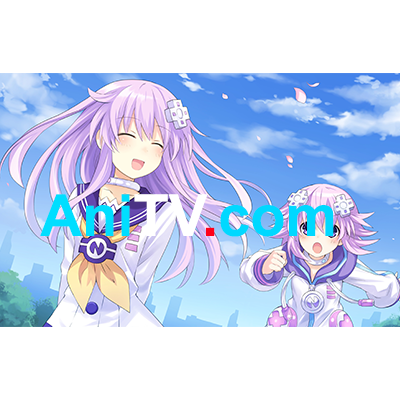
<style>
.page{position:relative;width:400px;height:400px;background:#ffffff}
.page>*{position:absolute;margin:0}
.t1{font:57.8px "Arial-BoldMT";color:#00deff}
.t2{font:57.8px "Arial-BoldMT";color:#ffffff}
.t3{font:57.8px "Arial-BoldMT";color:#ff0018}
.t4{font:57.8px "Arial-BoldMT";color:#00d8ff}
</style>
<div class="page">
<p class="t1" style="left:40px;top:194px;width:294px;height:43px">Ani<span class="t2">TV</span><span class="t3">.</span><span class="t4">com</span></p>
</div>
